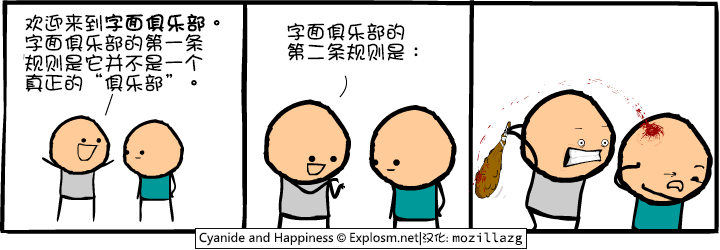
<style>
.page{position:relative;width:720px;height:250px;background:#ffffff}
.page>*{position:absolute;margin:0}
.t1{font:20px/20px "DFGirl";color:#000000}
.t2{font:20px/20px "DFGirl";color:#000000;font-weight:bold}
</style>
<div class="page">
<p class="t1" style="left:25px;top:13px;width:195px;height:79px">欢迎来到<span class="t2">字面俱乐部</span>。<br>字面俱乐部的第一条<br>规则是它并不是一个<br>真正的“俱乐部”。</p>
<p class="t1" style="left:287px;top:23px;width:131px;height:38px">字面俱乐部的<br>第二条规则是：</p>
</div>
